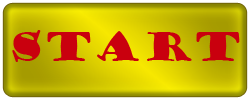
<style>
.page{position:relative;width:250px;height:100px}
.page>*{position:absolute;margin:0}
.t1{font:37.5px "GoudyStout";color:#c9000e}
</style>
<div class="page">
<p class="t1" style="left:12px;top:30px;width:228px;height:32px">start</p>
</div>
